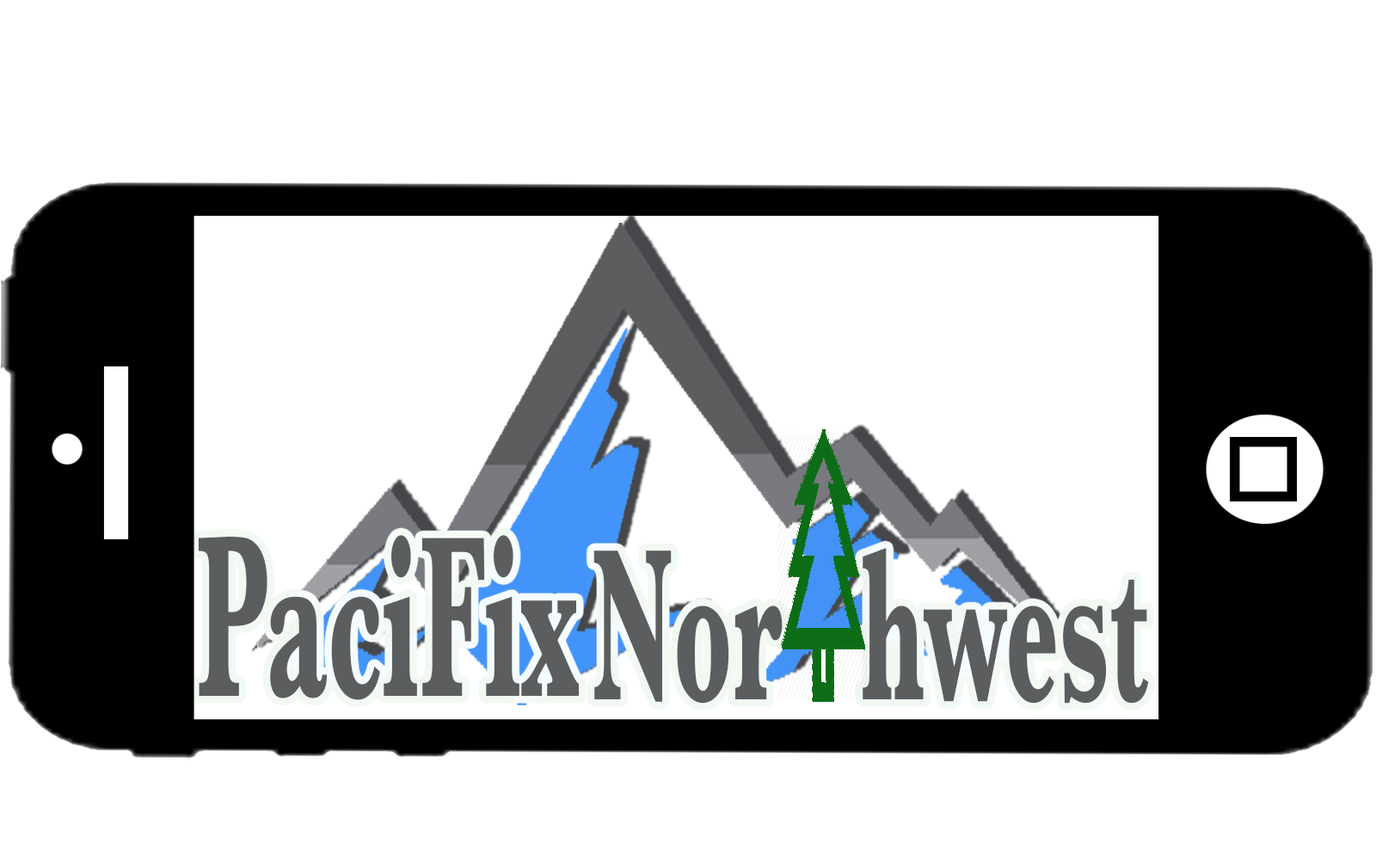
<style>
.page{position:relative;width:1376px;height:867px;background:#ffffff}
.page>*{position:absolute;margin:0}
.t1{font:237.9px "Baskerville-Bold";color:#5c5d5f;scale:0.47 1}
.t2{font:224.3px "Baskerville-Bold";color:#5c5d5f;scale:0.47 1}
</style>
<div class="page">
<p class="t1" style="left:198px;top:535px;width:382px;height:165px">PaciFix</p>
<p class="t2" style="left:593px;top:548px;width:556px;height:155px">Nor   hwest</p>
</div>
